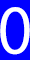
<style>
.page{position:relative;width:30px;height:60px;background:#0000ff}
.page>*{position:absolute;margin:0}
.t1{font:60.7px "KozGoPr6N-Regular";color:#ffffff}
</style>
<div class="page">
<p class="t1" style="left:0px;top:7px;width:30px;height:48px">0</p>
</div>
